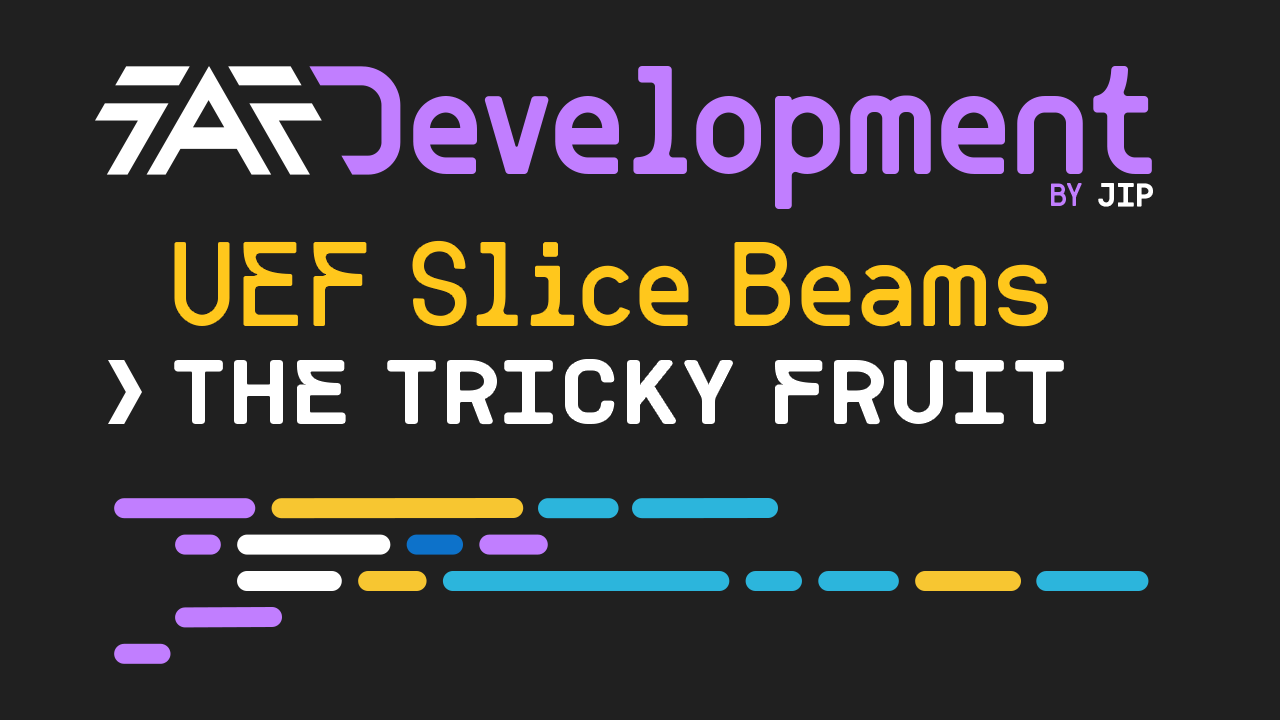
<style>
.page{position:relative;width:1280px;height:720px;background:#202020}
.page>*{position:absolute;margin:0}
.t1{font:159.4px "Nicolatte-Regular";color:#c17eff}
.t2{font:33.1px "Nicolatte-Regular";letter-spacing:0.02em;color:#c17eff;text-transform:uppercase}
.t3{font:33.1px "Nicolatte-Regular";letter-spacing:0.02em;color:#ffffff;text-transform:uppercase;font-weight:bold}
.t4{font:127.7px "Nicolatte-Regular";color:#ffc71c}
.t5{font:92.1px "Nicolatte-Regular";letter-spacing:0.04em;color:#ffffff;text-transform:uppercase;scale:1.16 1}
</style>
<div class="page">
<p class="t1" style="left:413px;top:66px;width:739px;height:143px">evelopment</p>
<p class="t2" style="left:1051px;top:183px;width:31px;height:23px">by</p>
<p class="t3" style="left:1098px;top:183px;width:55px;height:24px">jip</p>
<p class="t4" style="left:173px;top:239px;width:876px;height:89px">UEF Slice Beams</p>
<p class="t5" style="left:175px;top:360px;width:888px;height:64px">The tricky fruit</p>
</div>
